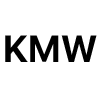
<style>
.page{position:relative;width:100px;height:100px;background:#ffffff}
.page>*{position:absolute;margin:0}
.t1{font:37.5px "SFProDisplay-Bold";color:#000000}
</style>
<div class="page">
<p class="t1" style="left:5px;top:35px;width:92px;height:27px">KMW</p>
</div>
